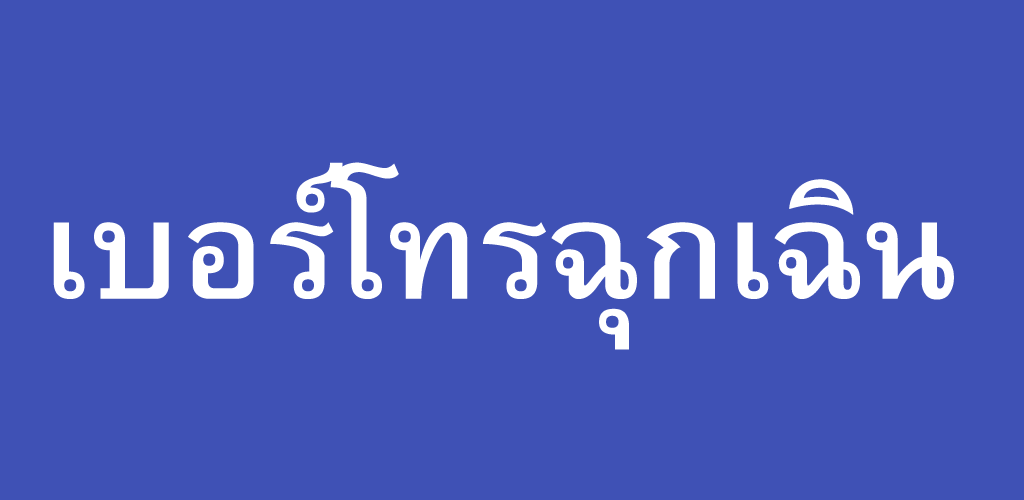
<style>
.page{position:relative;width:1024px;height:500px;background:#3f51b5}
.page>*{position:absolute;margin:0}
.t1{font:190px "BrowalliaNew-Bold";color:#ffffff}
</style>
<div class="page">
<p class="t1" style="left:53px;top:162px;width:901px;height:188px">เบอร์โทรฉุกเฉิน</p>
</div>
